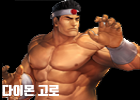
<style>
.page{position:relative;width:140px;height:100px;background:#000000}
.page>*{position:absolute;margin:0}
.t1{font:12px "TmonMonsoriBlack";color:#ffffff}
</style>
<div class="page">
<p class="t1" style="left:2px;top:85px;width:57px;height:11px">다이몬 고로</p>
</div>
